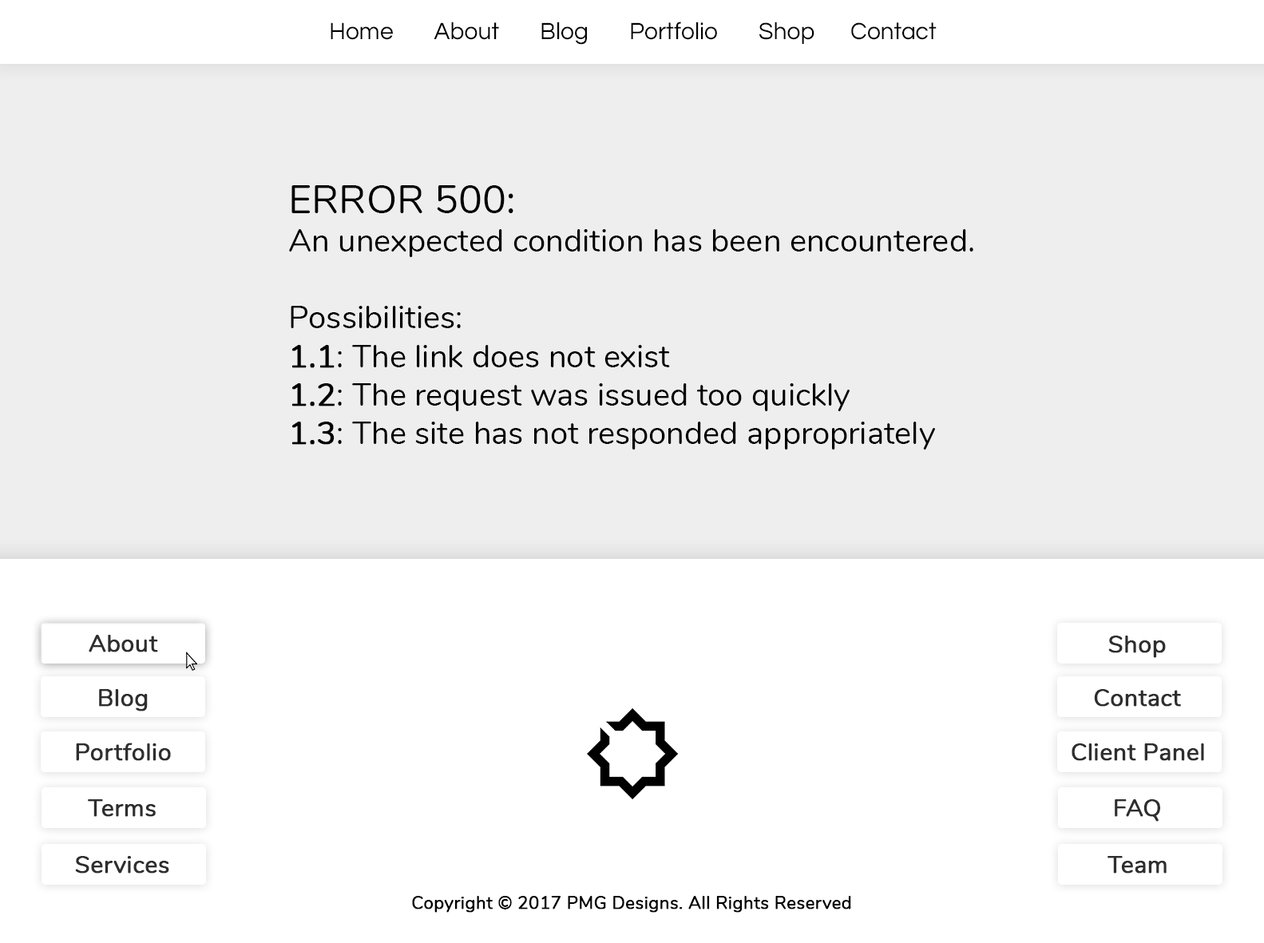
<style>
.page{position:relative;width:1264px;height:943px;background:#eeeeee}
.page>*{position:absolute;margin:0}
.t1{font:24.3px "Questrial-Regular";color:#000000}
.t2{font:32.1px "Nunito-Regular";color:#000000}
.t3{font:40.1px "Nunito-Regular";color:#000000}
.t4{font:32.1px "Nunito-Regular";color:#000000;font-weight:bold}
.t5{font:24px "Nunito-Regular";color:#2e2e2e;font-weight:bold}
.t6{font:17.7px "Nunito-Regular";color:#000000;font-weight:bold}
</style>
<div class="page">
<p class="t1" style="left:331px;top:22px;width:606px;height:23px">Home        About        Blog        Portfolio        Shop       Contact</p>
<p class="t2" style="left:289px;top:185px;width:685px;height:265px"><span class="t3">ERROR 500:<br></span>An unexpected condition has been encountered.<br><br>Possibilities:<br><span class="t4">1.1</span>: The link does not exist<br><span class="t4">1.2</span>: The request was issued too quickly<br><span class="t4">1.3</span>: The site has not responded appropriately</p>
<p class="t5" style="left:89px;top:635px;width:69px;height:17px">About</p>
<p class="t5" style="left:1109px;top:636px;width:57px;height:22px">Shop</p>
<p class="t5" style="left:99px;top:689px;width:49px;height:23px">Blog</p>
<p class="t5" style="left:1094px;top:689px;width:87px;height:18px">Contact</p>
<p class="t5" style="left:76px;top:743px;width:95px;height:18px">Portfolio</p>
<p class="t5" style="left:1072px;top:744px;width:132px;height:17px">Client Panel</p>
<p class="t5" style="left:88px;top:799px;width:68px;height:18px">Terms</p>
<p class="t5" style="left:1115px;top:799px;width:45px;height:23px">FAQ</p>
<p class="t5" style="left:75px;top:856px;width:94px;height:18px">Services</p>
<p class="t5" style="left:1108px;top:856px;width:59px;height:18px">Team</p>
<p class="t6" style="left:412px;top:896px;width:439px;height:17px">Copyright © 2017 PMG Designs. All Rights Reserved</p>
</div>
